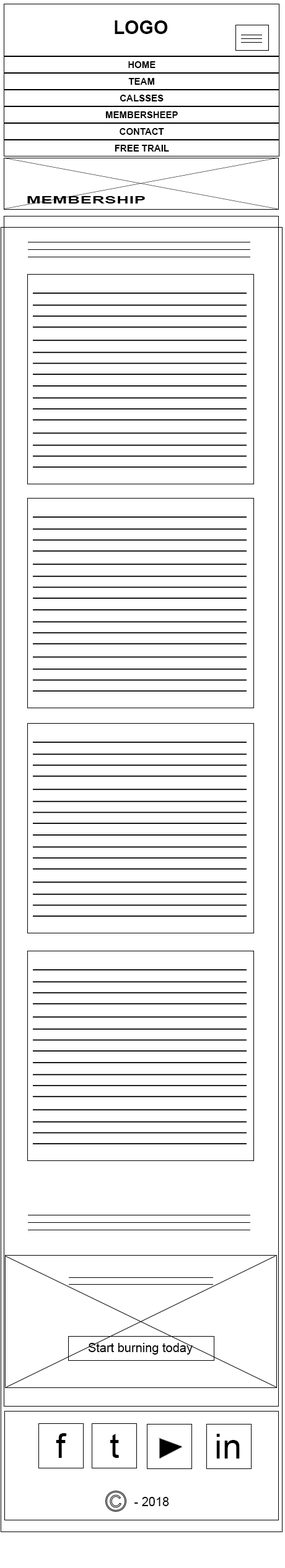
<style>
.page{position:relative;width:285px;height:1568px;background:#ffffff}
.page>*{position:absolute;margin:0}
.t1{font:18.6px "Arial-BoldMT";color:#000000}
.t2{font:9.3px "Arial-BoldMT";color:#000000}
.t3{font:9.7px "Arial-BoldMT";color:#000000;scale:1.82 1}
.t4{font:12.4px "ArialMT";color:#000000}
.t5{font:34.5px "ArialMT";color:#000000}
</style>
<div class="page">
<p class="t1" style="left:114px;top:20px;width:54px;height:14px">LOGO</p>
<p class="t2" style="left:128px;top:61px;width:27px;height:7px">HOME</p>
<p class="t2" style="left:128px;top:78px;width:26px;height:7px">TEAM</p>
<p class="t2" style="left:119px;top:95px;width:44px;height:6px">CALSSES</p>
<p class="t2" style="left:105px;top:111px;width:73px;height:7px">MEMBERSHEEP</p>
<p class="t2" style="left:119px;top:128px;width:45px;height:7px">CONTACT</p>
<p class="t2" style="left:114px;top:145px;width:55px;height:7px">FREE TRAIL</p>
<p class="t3" style="left:27px;top:196px;width:118px;height:7px">MEMBERSHIP</p>
<p class="t4" style="left:88px;top:1343px;width:104px;height:12px">Start burning today</p>
<p class="t5" style="left:56px;top:1433px;width:11px;height:25px">f</p>
<p class="t5" style="left:110px;top:1434px;width:9px;height:24px">t</p>
<p class="t5" style="left:216px;top:1434px;width:23px;height:25px">in</p>
<p class="t4" style="left:134px;top:1497px;width:35px;height:9px">- 2018</p>
</div>
